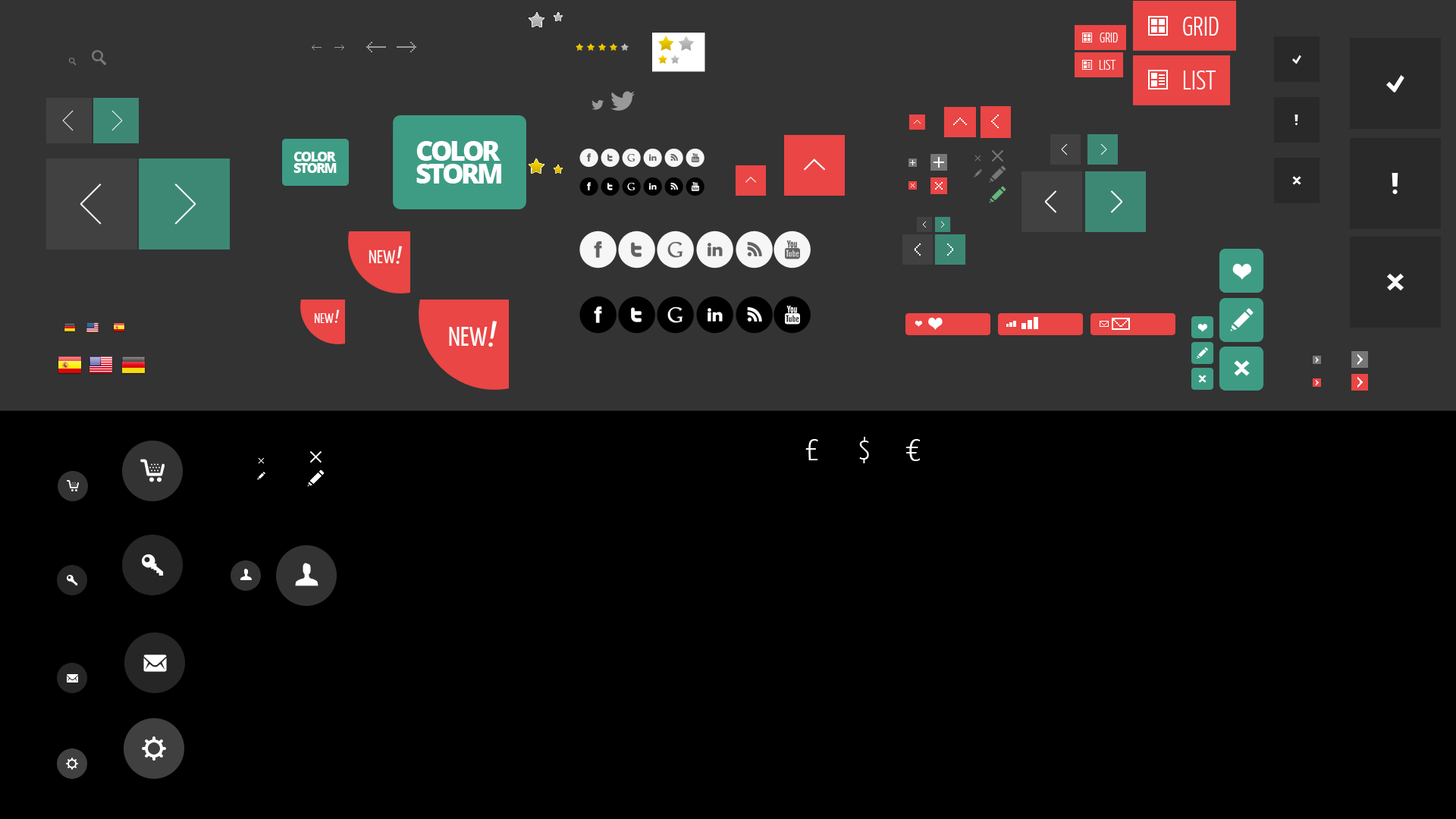
<style>
.page{position:relative;width:1456px;height:819px;background:#000000}
.page>*{position:absolute;margin:0}
.t1{font:27.3px "YanoneKaffeesatz-Light";color:#ffffff;text-transform:uppercase}
.t2{font:13.6px "YanoneKaffeesatz-Light";color:#ffffff;text-transform:uppercase}
.t3{font:27.3px/22.7px "OpenSans-Extrabold";letter-spacing:-0.1em;color:#ffffff;text-transform:uppercase}
.t4{font:13.6px/11.4px "OpenSans-Extrabold";letter-spacing:-0.1em;color:#ffffff;text-transform:uppercase}
.t5{font:13.6px "YanoneKaffeesatz-Regular";color:#ffffff;text-transform:uppercase}
.t6{font:18.2px "YanoneKaffeesatz-Regular";color:#ffffff;text-transform:uppercase}
.t7{font:27.3px "YanoneKaffeesatz-Regular";color:#ffffff;text-transform:uppercase}
.t8{font:36.4px "YanoneKaffeesatz-Regular";color:#ffffff;text-transform:uppercase}
.t9{font:30.3px "YanoneKaffeesatz-Light";color:#ffffff}
.t10{font:36.4px "YanoneKaffeesatz-Light";color:#ffffff}
</style>
<div class="page">
<p class="t1" style="left:1183px;top:17px;width:36px;height:19px">Grid</p>
<p class="t2" style="left:1100px;top:33px;width:18px;height:9px">Grid</p>
<p class="t2" style="left:1099px;top:60px;width:17px;height:10px">List</p>
<p class="t1" style="left:1183px;top:71px;width:33px;height:18px">List</p>
<p class="t3" style="left:416px;top:141px;width:85px;height:43px">Color<br>storm</p>
<p class="t4" style="left:293px;top:152px;width:44px;height:21px">Color<br>storm</p>
<p class="t5" style="left:314px;top:313px;width:20px;height:10px">New</p>
<p class="t6" style="left:334px;top:309px;width:6px;height:14px;rotate:10deg">!</p>
<p class="t7" style="left:449px;top:327px;width:39px;height:19px">New</p>
<p class="t8" style="left:488px;top:321px;width:9px;height:26px;rotate:10deg">!</p>
<p class="t9" style="left:859px;top:437px;width:10px;height:26px">$</p>
<p class="t10" style="left:805px;top:439px;width:13px;height:21px">£</p>
<p class="t10" style="left:906px;top:439px;width:15px;height:22px">€</p>
</div>
